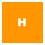
<style>
.page{position:relative;width:45px;height:45px;background:#ff9600}
.page>*{position:absolute;margin:0}
.t1{font:11px "Arial-Black";color:#ffffff}
</style>
<div class="page">
<p class="t1" style="left:18px;top:18px;width:8px;height:9px">H</p>
</div>
